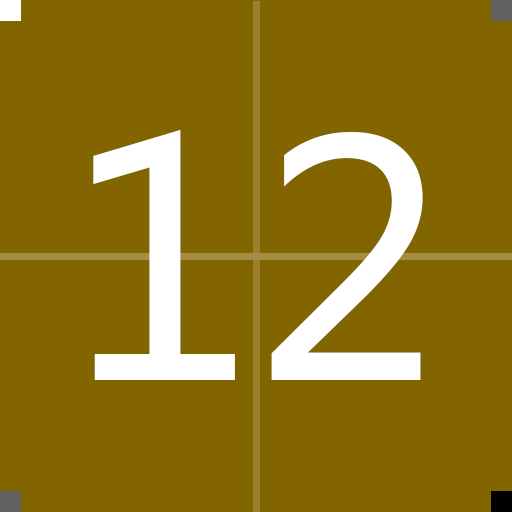
<style>
.page{position:relative;width:512px;height:512px;background:#836500}
.page>*{position:absolute;margin:0}
.t1{font:323.1px "MicrosoftYaHei";color:#ffffff}
</style>
<div class="page">
<p class="t1" style="left:93px;top:130px;width:330px;height:250px">12</p>
</div>
